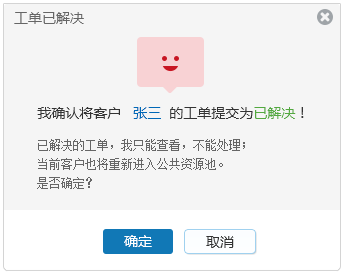
<style>
.page{position:relative;width:343px;height:276px;background:#f5f5f5}
.page>*{position:absolute;margin:0}
.t1{font:14px "MicrosoftYaHei";color:#666666}
.t2{font:14px "MicrosoftYaHei";color:#333333}
.t3{font:14px "MicrosoftYaHei";color:#0068b7}
.t4{font:14px "MicrosoftYaHei";color:#53a93f}
.t5{font:12px/19px "NSimSun";color:#666666}
.t6{font:14px "MicrosoftYaHei";color:#ffffff}
</style>
<div class="page">
<p class="t1" style="left:14px;top:12px;width:70px;height:12px">工单已解决</p>
<p class="t2" style="left:37px;top:107px;width:267px;height:12px">我确认将客户   <span class="t3">张三</span>  的工单提交为<span class="t4">已解决</span>！</p>
<p class="t5" style="left:37px;top:139px;width:208px;height:50px">已解决的工单，我只能查看，不能处理；<br>当前客户也将重新进入公共资源池。<br>是否确定？</p>
<p class="t6" style="left:124px;top:235px;width:28px;height:12px">确定</p>
<p class="t2" style="left:206px;top:236px;width:28px;height:12px">取消</p>
</div>
